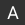
<style>
.page{position:relative;width:25px;height:25px;background:#323232}
.page>*{position:absolute;margin:0}
.t1{font:18px "Roboto-Regular";color:#ffffff}
</style>
<div class="page">
<p class="t1" style="left:7px;top:6px;width:12px;height:13px">A</p>
</div>
